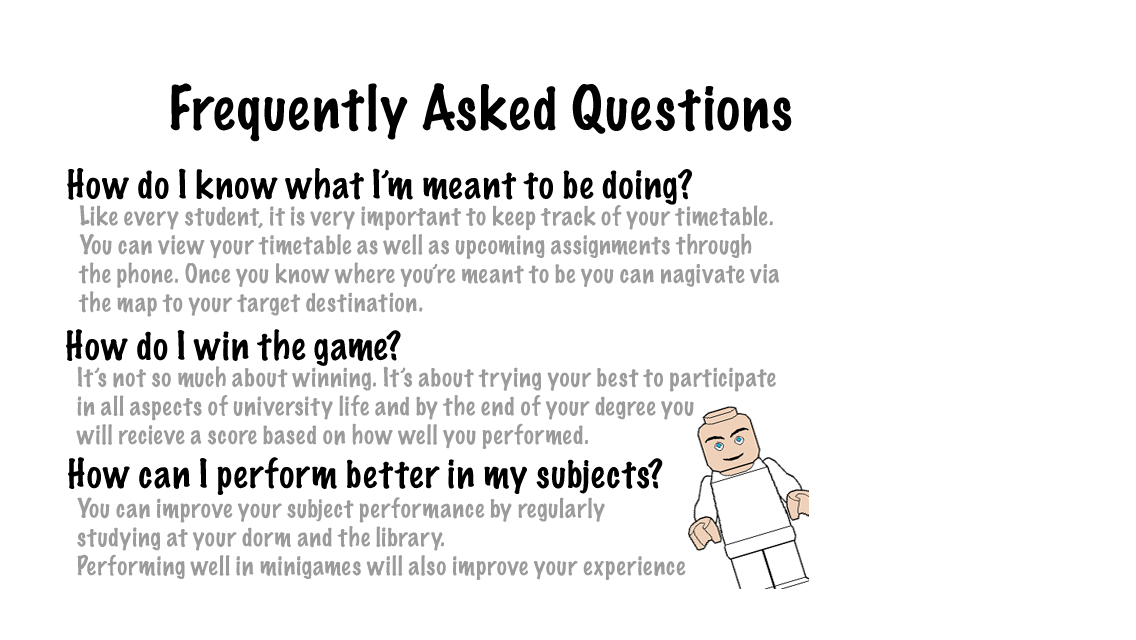
<style>
.page{position:relative;width:1136px;height:640px;background:#ffffff}
.page>*{position:absolute;margin:0}
.t1{font:56px "MarkerFelt-Thin";color:#000000}
.t2{font:36px "MarkerFelt-Thin";color:#000000}
.t3{font:24px "MarkerFelt-Thin";color:#9b9b9b}
</style>
<div class="page">
<p class="t1" style="left:170px;top:83px;width:622px;height:59px">Frequently Asked Questions</p>
<p class="t2" style="left:67px;top:168px;width:625px;height:37px">How do I know what I’m meant to be doing?</p>
<p class="t3" style="left:78px;top:205px;width:702px;height:112px">Like every student, it is very important to keep track of your timetable. <br>You can view your timetable as well as upcoming assignments through <br>the phone. Once you know where you’re meant to be you can nagivate via <br>the map to your target destination.</p>
<p class="t2" style="left:66px;top:329px;width:335px;height:37px">How do I win the game?</p>
<p class="t3" style="left:76px;top:366px;width:700px;height:83px">It’s not so much about winning. It’s about trying your best to participate <br>in all aspects of university life and by the end of your degree you <br>will recieve a score based on how well you performed.</p>
<p class="t2" style="left:68px;top:457px;width:595px;height:38px">How can I perform better in my subjects?</p>
<p class="t3" style="left:77px;top:497px;width:609px;height:83px">You can improve your subject performance by regularly <br>studying at your dorm and the library. <br>Performing well in minigames will also improve your experience</p>
</div>
